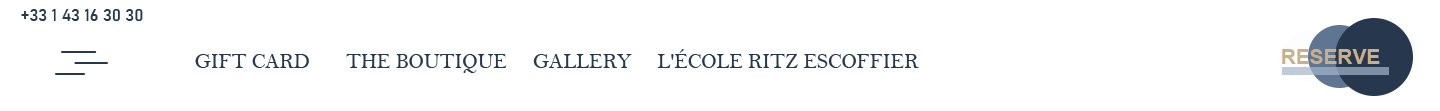
<style>
.page{position:relative;width:1440px;height:111px;background:#ffffff}
.page>*{position:absolute;margin:0}
.t1{font:16.7px "Bahnschrift";color:#27374d}
.t2{font:20.8px "BellMT";color:#27374d}
.t3{font:20.8px "Arial-BoldMT";color:#c8b08d}
</style>
<div class="page">
<p class="t1" style="left:21px;top:8px;width:122px;height:14px">+33 1 43 16 30 30</p>
<p class="t2" style="left:195px;top:49px;width:724px;height:24px">GIFT CARD       THE BOUTIQUE     GALLERY     L'ÉCOLE RITZ ESCOFFIER</p>
<p class="t3" style="left:1282px;top:49px;width:98px;height:15px">RESERVE</p>
</div>
